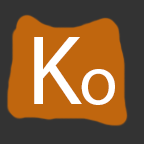
<style>
.page{position:relative;width:144px;height:144px;background:#333333}
.page>*{position:absolute;margin:0}
.t1{font:100px "MyriadPro-Regular";color:#ffffff}
.t2{font:70px "MyriadPro-Regular";color:#ffffff}
</style>
<div class="page">
<p class="t1" style="left:34px;top:37px;width:48px;height:67px">K</p>
<p class="t2" style="left:81px;top:69px;width:34px;height:36px">o</p>
</div>
